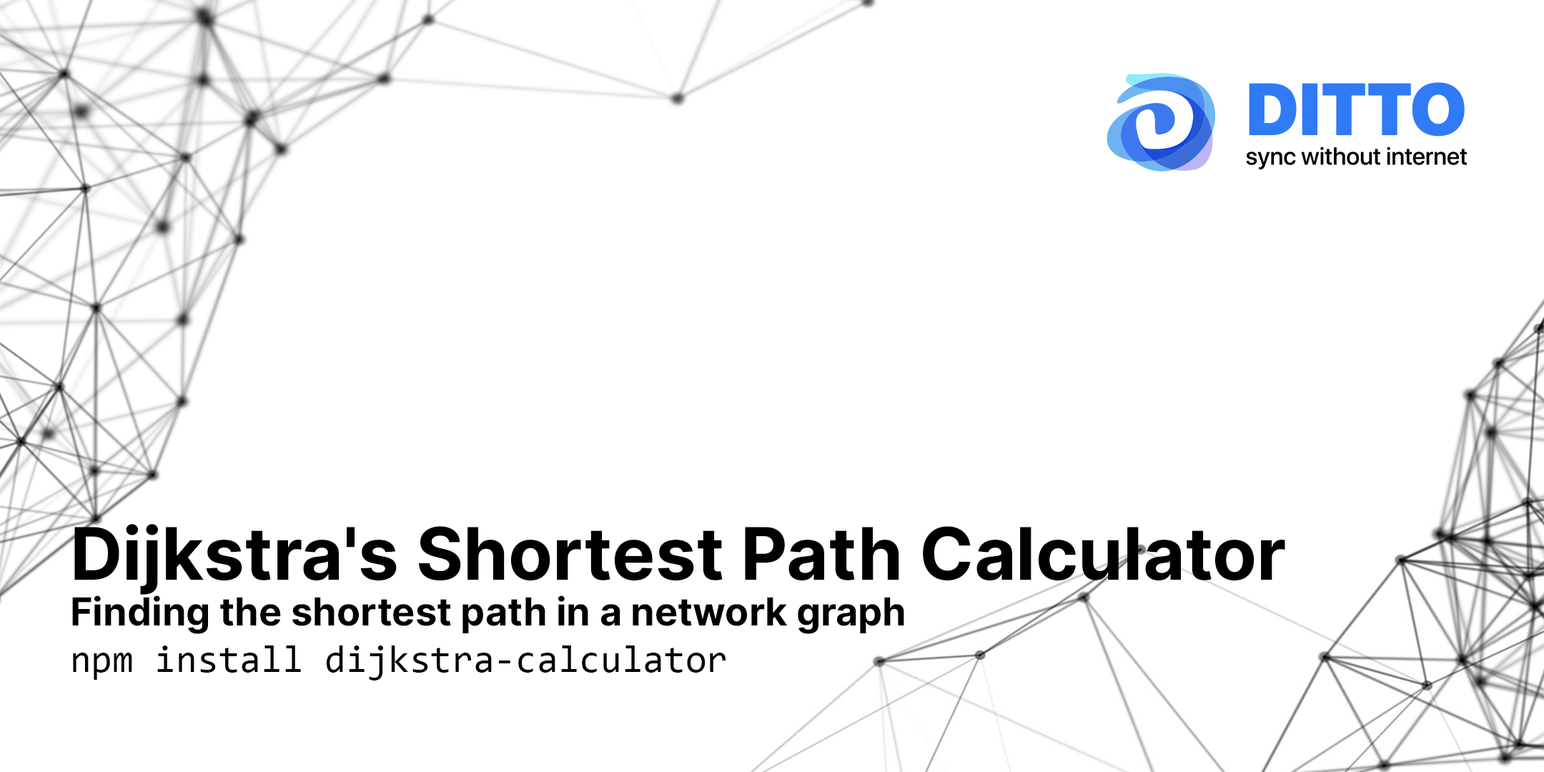
<style>
.page{position:relative;width:1544px;height:772px;background:#ffffff}
.page>*{position:absolute;margin:0}
.t1{font:38.6px "Inter-Bold";color:#000000}
.t2{font:72.4px "Inter-Bold";color:#000000}
.t3{font:38.6px "Consolas";color:#000000}
</style>
<div class="page">
<p class="t1" style="left:72px;top:524px;width:1213px;height:157px"><span class="t2">Dijkstra's Shortest Path Calculator<br></span>Finding the shortest path in a network graph<br><span class="t3">npm install dijkstra-calculator</span></p>
</div>
